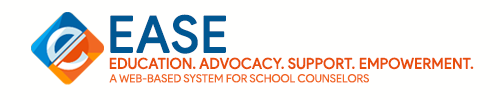
<style>
.page{position:relative;width:500px;height:100px;background:#fffffe}
.page>*{position:absolute;margin:0}
.t1{font:50.2px "ProductSans-Regular";letter-spacing:0.005em;color:#005792;font-weight:bold}
.t2{font:14.6px "ProductSans-Regular";color:#e84f0c;font-weight:bold}
.t3{font:11.2px "ProductSans-Regular";color:#f16823}
</style>
<div class="page">
<p class="t1" style="left:110px;top:14px;width:116px;height:40px">EASE</p>
<p class="t2" style="left:109px;top:57px;width:365px;height:13px">EDUCATION. ADVOCACY. SUPPORT. EMPOWERMENT.</p>
<p class="t3" style="left:109px;top:74px;width:260px;height:9px">A WEB-BASED SYSTEM FOR SCHOOL COUNSELORS</p>
</div>
